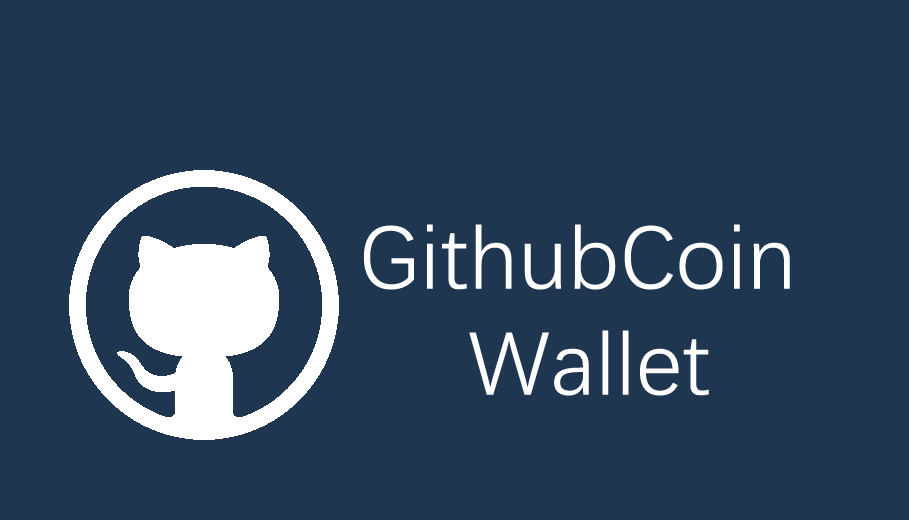
<style>
.page{position:relative;width:909px;height:520px;background:#1f3651}
.page>*{position:absolute;margin:0}
.t1{font:90px "DengXian-Regular";color:#ffffff}
</style>
<div class="page">
<p class="t1" style="left:364px;top:224px;width:426px;height:66px">GithubCoin</p>
<p class="t1" style="left:469px;top:330px;width:240px;height:66px">Wallet</p>
</div>
